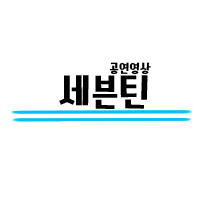
<style>
.page{position:relative;width:200px;height:200px;background:#ffffff}
.page>*{position:absolute;margin:0}
.t1{font:12px "TTCartoonstoryR";color:#000000}
.t2{font:36px "TTCartoonstoryR";color:#000000}
</style>
<div class="page">
<p class="t1" style="left:109px;top:62px;width:42px;height:13px">공연영상</p>
<p class="t2" style="left:59px;top:75px;width:89px;height:34px">세븐틴</p>
</div>
